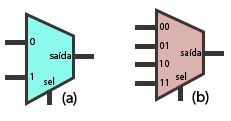
<style>
.page{position:relative;width:231px;height:121px;background:#ffffff}
.page>*{position:absolute;margin:0}
.t1{font:10px "MyriadHebrew-Regular";color:#000000}
.t2{font:15px "MyriadHebrew-Regular";color:#000000}
</style>
<div class="page">
<p class="t1" style="left:159px;top:23px;width:11px;height:7px">00</p>
<p class="t1" style="left:30px;top:38px;width:5px;height:7px">0</p>
<p class="t1" style="left:50px;top:51px;width:21px;height:8px">saída</p>
<p class="t1" style="left:159px;top:42px;width:9px;height:7px">01</p>
<p class="t1" style="left:180px;top:48px;width:22px;height:8px">saída</p>
<p class="t1" style="left:159px;top:60px;width:11px;height:7px">10</p>
<p class="t1" style="left:30px;top:73px;width:3px;height:7px">1</p>
<p class="t1" style="left:44px;top:77px;width:11px;height:8px">sel</p>
<p class="t1" style="left:176px;top:72px;width:11px;height:8px">sel</p>
<p class="t1" style="left:160px;top:79px;width:8px;height:7px">11</p>
<p class="t2" style="left:62px;top:92px;width:15px;height:14px">(a)</p>
<p class="t2" style="left:192px;top:91px;width:17px;height:14px">(b)</p>
</div>
